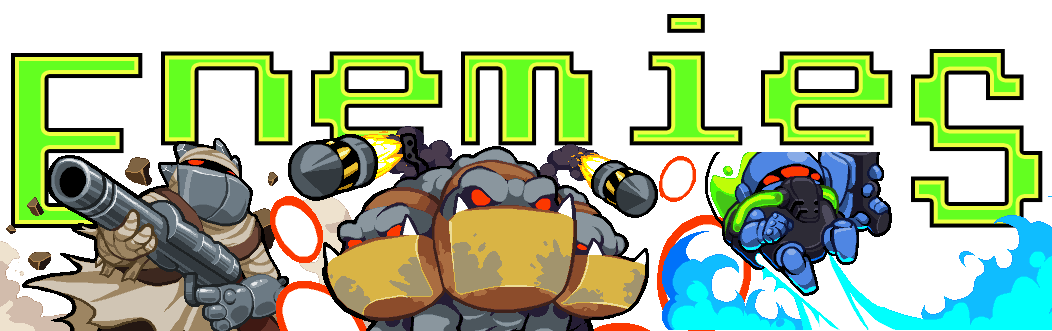
<style>
.page{position:relative;width:1052px;height:331px;background:#ffffff}
.page>*{position:absolute;margin:0}
.t1{font:150px "PressStart2P"}
.t2{font:199.5px "PressStart2P";scale:0.75 1}
.t3{font:204px "PressStart2P";scale:0.74 1}
</style>
<div class="page">
<p class="t1" style="left:11px;top:14px;width:1032px;height:214px"><span class="t2">E</span>nemie<span class="t3">S</span></p>
</div>
